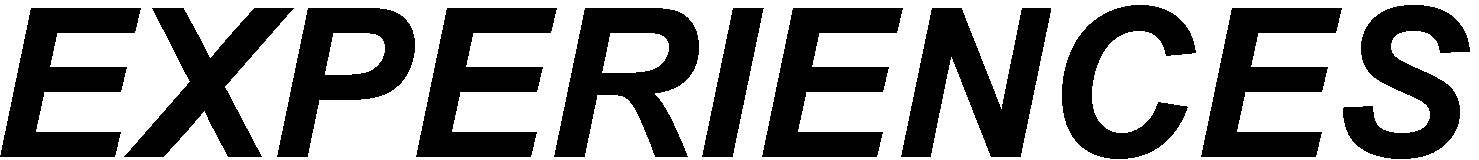
<style>
.page{position:relative;width:1479px;height:160px;background:#ffffff}
.page>*{position:absolute;margin:0}
.t1{font:208px "Arial-BoldItalicMT";color:#000000}
</style>
<div class="page">
<p class="t1" style="left:0px;top:5px;width:1470px;height:154px">EXPERIENCES</p>
</div>
